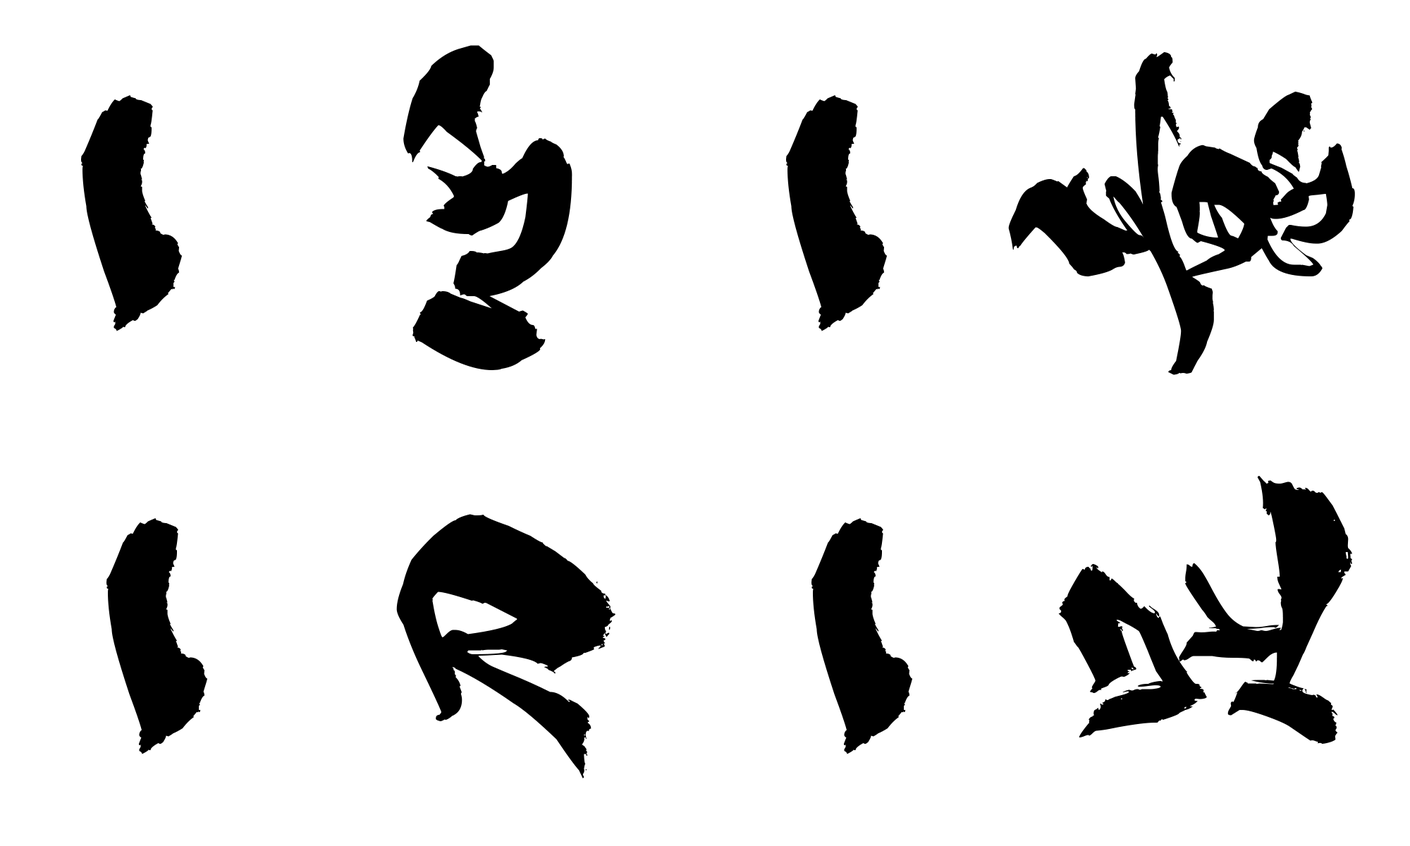
<style>
.page{position:relative;width:1410px;height:846px;background:#ffffff}
.page>*{position:absolute;margin:0}
.t1{font:352.4px "zihun55hao-longyinshoushu";color:#000000}
</style>
<div class="page">
<p class="t1" style="left:81px;top:45px;width:1274px;height:733px;rotate:-90deg">一心一意<br> 一刀一足</p>
</div>
